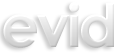
<style>
.page{position:relative;width:125px;height:53px;background:#ffffff}
.page>*{position:absolute;margin:0}
.t1{font:60px "CenturyGothic-Bold";letter-spacing:-0.05em;color:#e3e3e3}
</style>
<div class="page">
<p class="t1" style="left:3px;top:2px;width:111px;height:46px">evid</p>
</div>
